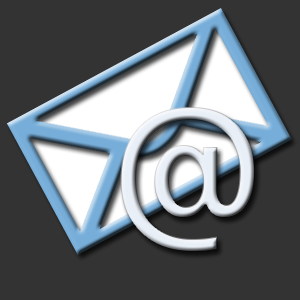
<style>
.page{position:relative;width:300px;height:300px;background:#333333}
.page>*{position:absolute;margin:0}
.t1{font:160px "Albertus-Medium"}
</style>
<div class="page">
<p class="t1" style="left:120px;top:106px;width:136px;height:146px">@</p>
</div>
